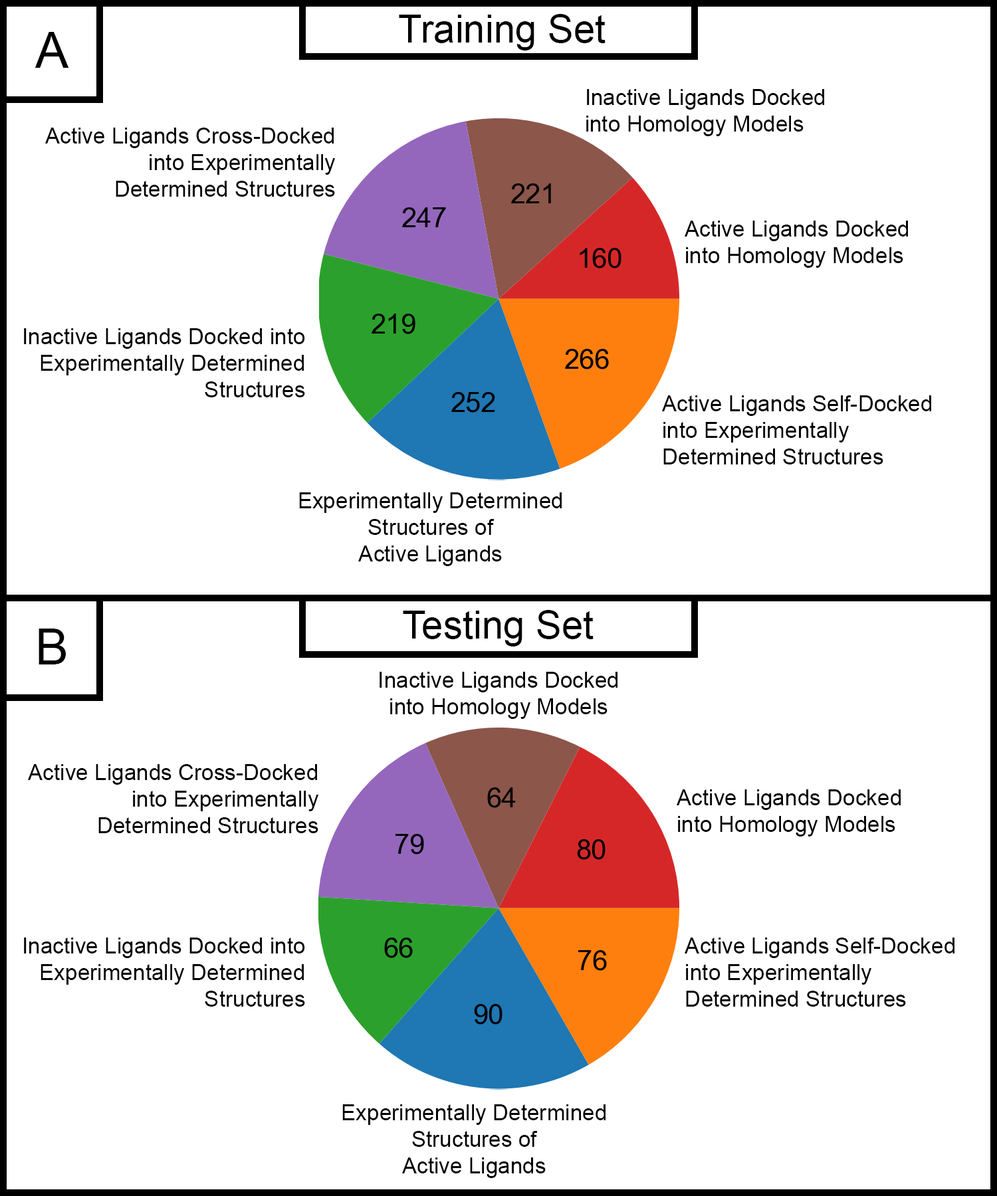
<style>
.page{position:relative;width:997px;height:1196px;background:#ffffff}
.page>*{position:absolute;margin:0}
.t1{font:38.8px "ArialMT";color:#000000}
.t2{font:49.8px "ArialMT";color:#000000}
.t3{font:22.2px "ArialMT";color:#000000}
</style>
<div class="page">
<p class="t1" style="left:399px;top:14px;width:206px;height:37px">Training Set</p>
<p class="t2" style="left:35px;top:32px;width:34px;height:36px">A</p>
<p class="t3" style="left:586px;top:89px;width:238px;height:47px">Inactive Ligands Docked<br>into Homology Models</p>
<p class="t3" style="left:45px;top:128px;width:290px;height:69px;text-align:right">Active Ligands Cross-Docked into Experimentally<br>Determined Structures</p>
<p class="t3" style="left:684px;top:221px;width:224px;height:47px">Active Ligands Docked<br>into Homology Models</p>
<p class="t3" style="left:24px;top:328px;width:281px;height:69px;text-align:right">Inactive Ligands Docked into Experimentally Determined Structures</p>
<p class="t3" style="left:662px;top:395px;width:269px;height:70px">Active Ligands Self-Docked<br>into Experimentally<br>Determined Structures</p>
<p class="t3" style="left:299px;top:492px;width:263px;height:74px;text-align:center">Experimentally Determined<br>Structures of<br>Active Ligands</p>
<p class="t1" style="left:403px;top:610px;width:190px;height:37px">Testing Set</p>
<p class="t2" style="left:39px;top:629px;width:27px;height:36px">B</p>
<p class="t3" style="left:379px;top:672px;width:238px;height:47px;text-align:center">Inactive Ligands Docked<br>into Homology Models</p>
<p class="t3" style="left:28px;top:764px;width:290px;height:69px;text-align:right">Active Ligands Cross-Docked into Experimentally<br>Determined Structures</p>
<p class="t3" style="left:677px;top:789px;width:223px;height:48px">Active Ligands Docked<br>into Homology Models</p>
<p class="t3" style="left:24px;top:938px;width:281px;height:69px;text-align:right">Inactive Ligands Docked into Experimentally Determined Structures</p>
<p class="t3" style="left:684px;top:938px;width:270px;height:69px">Active Ligands Self-Docked<br>into Experimentally<br>Determined Structures</p>
<p class="t3" style="left:342px;top:1105px;width:263px;height:73px;text-align:center">Experimentally Determined<br>Structures of<br>Active Ligands</p>
</div>
